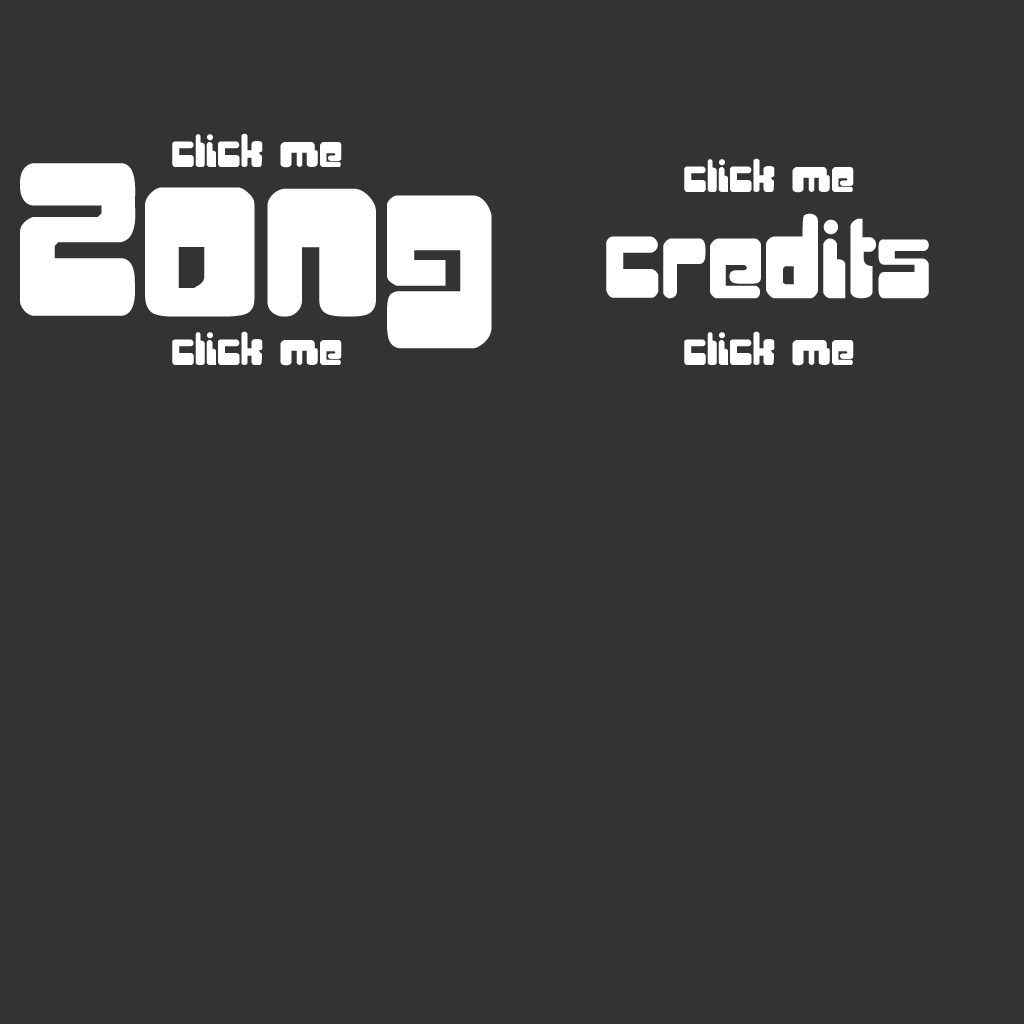
<style>
.page{position:relative;width:1024px;height:1024px;background:#333333}
.page>*{position:absolute;margin:0}
.t1{font:30px "Digifit";letter-spacing:0.04em;color:#ffffff}
.t2{font:153px "Digifit";letter-spacing:0.04em;color:#ffffff}
.t3{font:72px "Digifit";letter-spacing:0.04em;color:#ffffff}
</style>
<div class="page">
<p class="t1" style="left:172px;top:133px;width:170px;height:35px">click me</p>
<p class="t1" style="left:684px;top:158px;width:170px;height:35px">click me</p>
<p class="t2" style="left:20px;top:163px;width:472px;height:186px">Zong</p>
<p class="t3" style="left:606px;top:213px;width:323px;height:86px">credits</p>
<p class="t1" style="left:172px;top:331px;width:170px;height:35px">click me</p>
<p class="t1" style="left:684px;top:331px;width:170px;height:35px">click me</p>
</div>
